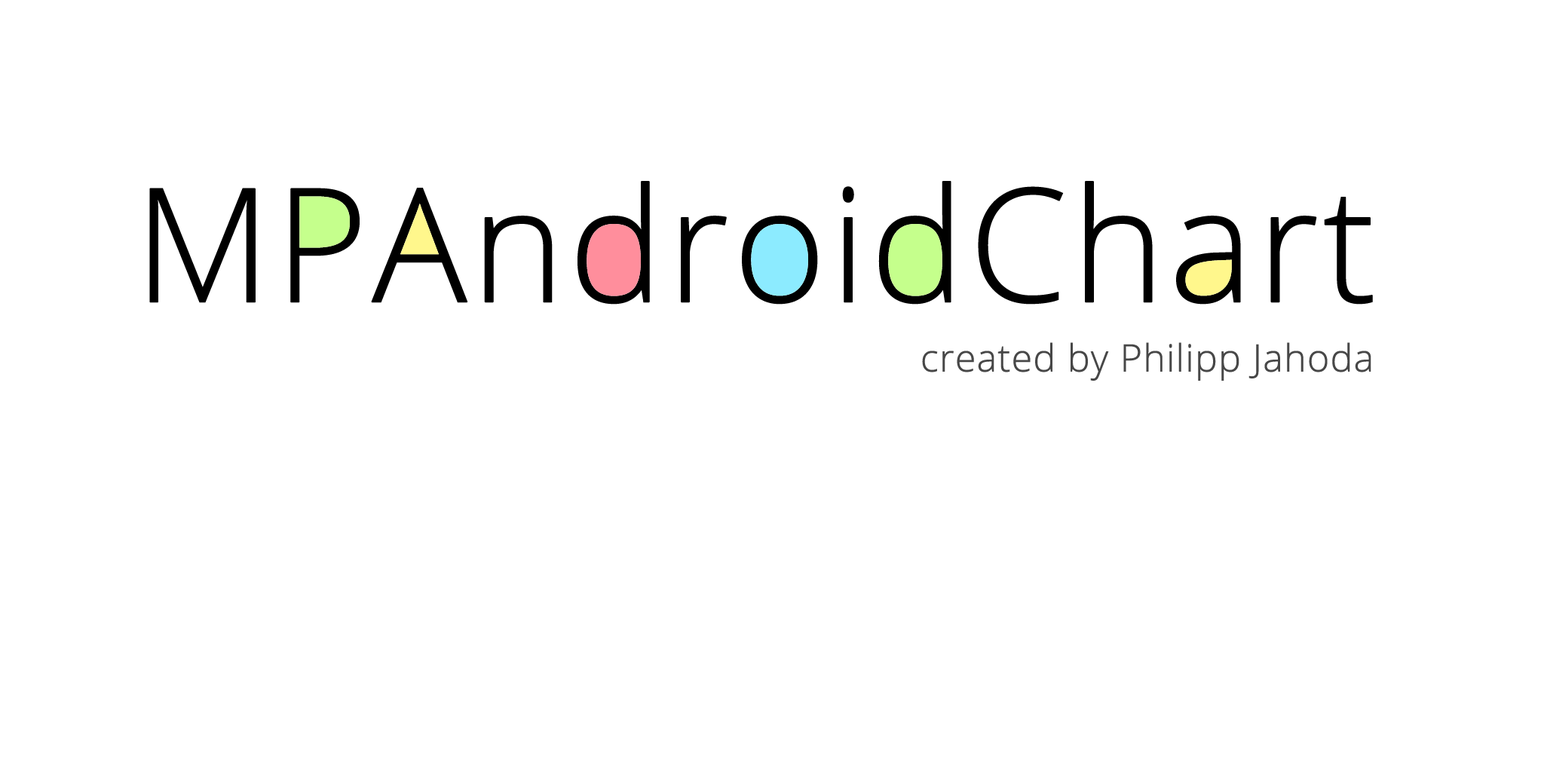
<style>
.page{position:relative;width:1544px;height:772px;background:#ffffff}
.page>*{position:absolute;margin:0}
.t1{font:158.4px "OpenSans-Light";color:#000000;font-weight:bold}
.t2{font:37.7px "OpenSans-Light";color:#474747;font-weight:bold}
</style>
<div class="page">
<p class="t1" style="left:149px;top:181px;width:1224px;height:124px">MPAndroidChart</p>
<p class="t2" style="left:922px;top:342px;width:450px;height:39px">created by Philipp Jahoda</p>
</div>
